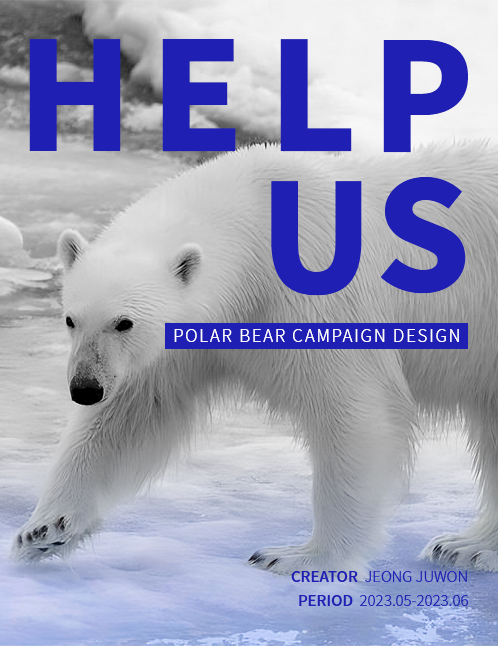
<style>
.page{position:relative;width:498px;height:646px}
.page>*{position:absolute;margin:0}
.t1{font:150px "NotoSansKR-Black";color:#1f1fb3}
.t2{font:17px "NotoSansKR-Light";letter-spacing:0.1em;color:#ffffff}
.t3{font:15px "NotoSansKR-Light";color:#1f1fb3}
.t4{font:15px "NotoSansKR-Medium";color:#1f1fb3}
</style>
<div class="page">
<p class="t1" style="left:29px;top:39px;width:92px;height:112px">H</p>
<p class="t1" style="left:162px;top:39px;width:74px;height:113px">E</p>
<p class="t1" style="left:280px;top:39px;width:72px;height:113px">L</p>
<p class="t1" style="left:383px;top:40px;width:85px;height:113px">P</p>
<p class="t1" style="left:271px;top:181px;width:91px;height:115px">U</p>
<p class="t1" style="left:380px;top:177px;width:86px;height:117px">S</p>
<p class="t2" style="left:174px;top:329px;width:285px;height:13px">POLAR BEAR CAMPAIGN DESIGN</p>
<p class="t3" style="left:291px;top:571px;width:176px;height:11px"><span class="t4">CREATOR  </span>JEONG JUWON</p>
<p class="t3" style="left:299px;top:595px;width:170px;height:11px"><span class="t4">PERIOD  </span>2023.05-2023.06</p>
</div>
